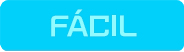
<style>
.page{position:relative;width:184px;height:52px;background:#00d0fa}
.page>*{position:absolute;margin:0}
.t1{font:24px "KafuTechnoStd-HV";letter-spacing:0.024em;color:#94f8ff}
</style>
<div class="page">
<p class="t1" style="left:51px;top:9px;width:86px;height:28px">FÁCIL</p>
</div>
